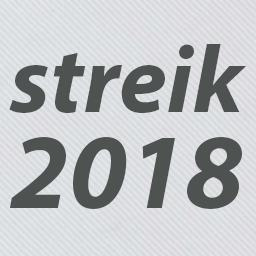
<style>
.page{position:relative;width:256px;height:256px;background:#4e5251}
.page>*{position:absolute;margin:0}
.t1{font:96px/96px "MyriadPro-BoldIt";color:#4e5251}
.t2{font:108px/96px "MyriadPro-BoldIt";color:#4e5251}
</style>
<div class="page">
<p class="t1" style="left:9px;top:44px;width:238px;height:165px;text-align:center">streik<br><span class="t2">2018</span></p>
</div>
